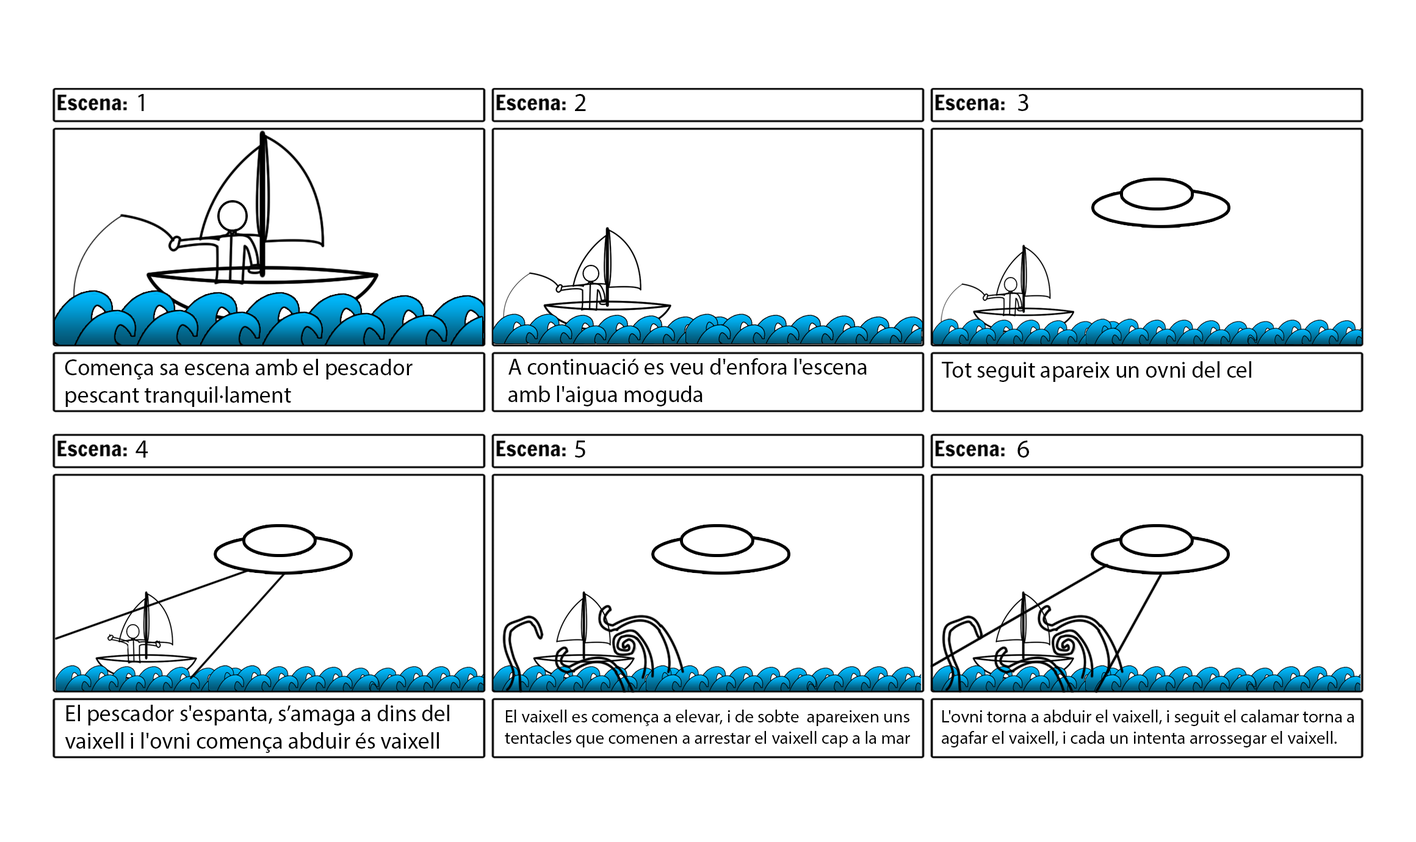
<style>
.page{position:relative;width:1416px;height:842px;background:#ffffff}
.page>*{position:absolute;margin:0}
.t1{font:25.4px "MyriadPro-Regular";color:#000000}
.t2{font:22.9px "MyriadPro-Regular";color:#000000}
.t3{font:17.8px "MyriadPro-Regular";color:#000000}
</style>
<div class="page">
<p class="t1" style="left:138px;top:94px;width:6px;height:17px">1</p>
<p class="t1" style="left:575px;top:94px;width:11px;height:17px">2</p>
<p class="t1" style="left:1018px;top:94px;width:10px;height:17px">3</p>
<p class="t2" style="left:65px;top:359px;width:348px;height:48px">Comença sa escena amb el pescador <br>pescant tranquil·lament</p>
<p class="t2" style="left:508px;top:358px;width:359px;height:48px">A continuació es veu d'enfora l'escena <br>amb l'aigua moguda</p>
<p class="t2" style="left:942px;top:361px;width:309px;height:21px">Tot seguit apareix un ovni del cel</p>
<p class="t1" style="left:135px;top:441px;width:13px;height:17px">4</p>
<p class="t1" style="left:575px;top:441px;width:10px;height:17px">5</p>
<p class="t1" style="left:1017px;top:441px;width:12px;height:17px">6</p>
<p class="t2" style="left:65px;top:705px;width:384px;height:48px">El pescador s'espanta, s’amaga a dins del<br>vaixell i l'ovni comença abduir és vaixell</p>
<p class="t3" style="left:505px;top:710px;width:405px;height:38px">El vaixell es comença a elevar, i de sobte  apareixen uns <br>tentacles que comenen a arrestar el vaixell cap a la mar</p>
<p class="t3" style="left:942px;top:710px;width:412px;height:38px">L'ovni torna a abduir el vaixell, i seguit el calamar torna a <br>agafar el vaixell, i cada un intenta arrossegar el vaixell.</p>
</div>
